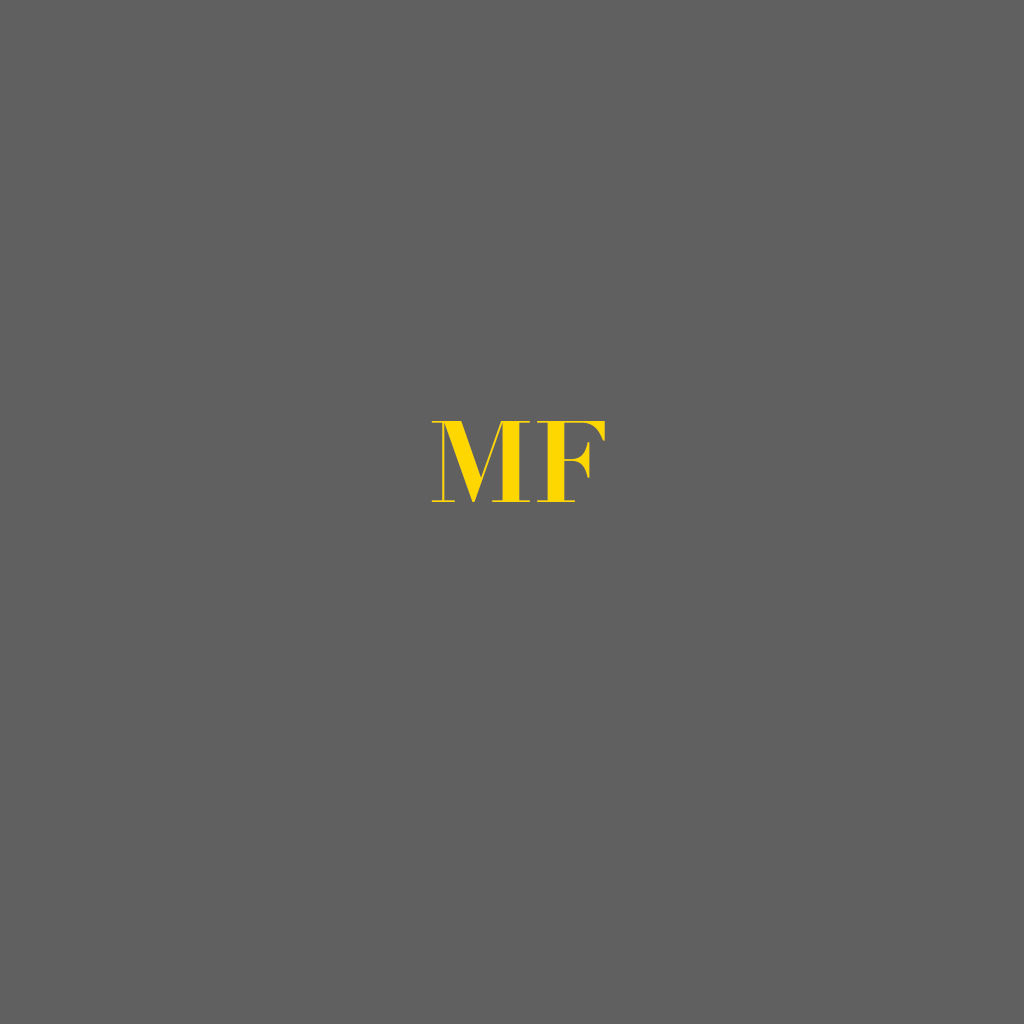
<style>
.page{position:relative;width:1024px;height:1024px;background:#606060}
.page>*{position:absolute;margin:0}
.t1{font:114px "Didot-Bold";color:#ffd700}
</style>
<div class="page">
<p class="t1" style="left:431px;top:421px;width:174px;height:81px">MF</p>
</div>
